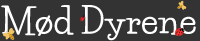
<style>
.page{position:relative;width:200px;height:41px;background:#333333}
.page>*{position:absolute;margin:0}
.t1{font:35.1px "LifeSavers-Bold";color:#ffffff}
</style>
<div class="page">
<p class="t1" style="left:1px;top:5px;width:195px;height:36px">Mød Dyrene</p>
</div>
